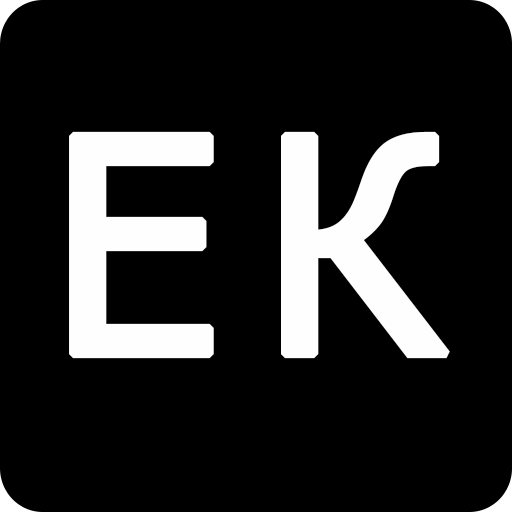
<style>
.page{position:relative;width:512px;height:512px;background:#000000}
.page>*{position:absolute;margin:0}
.t1{font:300px "Tahoma";color:#fffefe;font-weight:bold}
</style>
<div class="page">
<p class="t1" style="left:69px;top:131px;width:145px;height:228px">Е</p>
<p class="t1" style="left:281px;top:131px;width:169px;height:228px">К</p>
</div>
